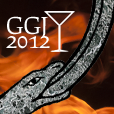
<style>
.page{position:relative;width:114px;height:114px}
.page>*{position:absolute;margin:0}
.t1{font:23px/14px "Prociono";color:#ffffff}
</style>
<div class="page">
<p class="t1" style="left:6px;top:16px;width:44px;height:33px">GGJ<br>2012</p>
</div>
